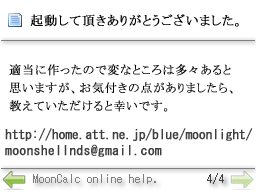
<style>
.page{position:relative;width:256px;height:192px;background:#ffffff}
.page>*{position:absolute;margin:0}
.t1{font:13px "MS-PMincho";letter-spacing:0.05em;color:#000000;font-weight:bold}
.t2{font:12px/18px "MS-PMincho";letter-spacing:0.05em;color:#000000;font-weight:bold}
.t3{font:13px "MS-Gothic";letter-spacing:-0.01em;color:#404040;font-weight:bold}
.t4{font:13px "MS-Gothic";letter-spacing:0.025em;color:#404040;font-weight:bold}
.t5{font:14px "Terminal";color:#7f7f7f}
.t6{font:14px "Terminal";color:#404040}
</style>
<div class="page">
<p class="t1" style="left:30px;top:14px;width:209px;height:13px">起動して頂きありがとうございました。</p>
<p class="t2" style="left:9px;top:64px;width:224px;height:48px">適当に作ったので変なところは多々あると<br>思いますが、お気付きの点がありましたら、<br>教えていただけると幸いです。</p>
<p class="t3" style="left:5px;top:128px;width:248px;height:13px">http://home.att.ne.jp/blue/moonlight/</p>
<p class="t4" style="left:5px;top:144px;width:157px;height:13px">moonshellnds@gmail.com</p>
<p class="t5" style="left:33px;top:174px;width:123px;height:10px">MoonCalc online help.</p>
<p class="t6" style="left:207px;top:173px;width:17px;height:11px">4/4</p>
</div>
